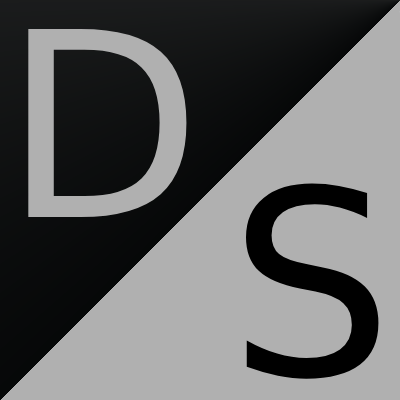
<style>
.page{position:relative;width:400px;height:400px;background:#b0b0b0}
.page>*{position:absolute;margin:0}
.t1{font:258px "DejaVuSans";color:#b0b0b0}
.t2{font:258px "DejaVuSans";color:#000000}
</style>
<div class="page">
<p class="t1" style="left:28px;top:28px;width:159px;height:189px">D</p>
<p class="t2" style="left:246px;top:183px;width:133px;height:196px">S</p>
</div>
